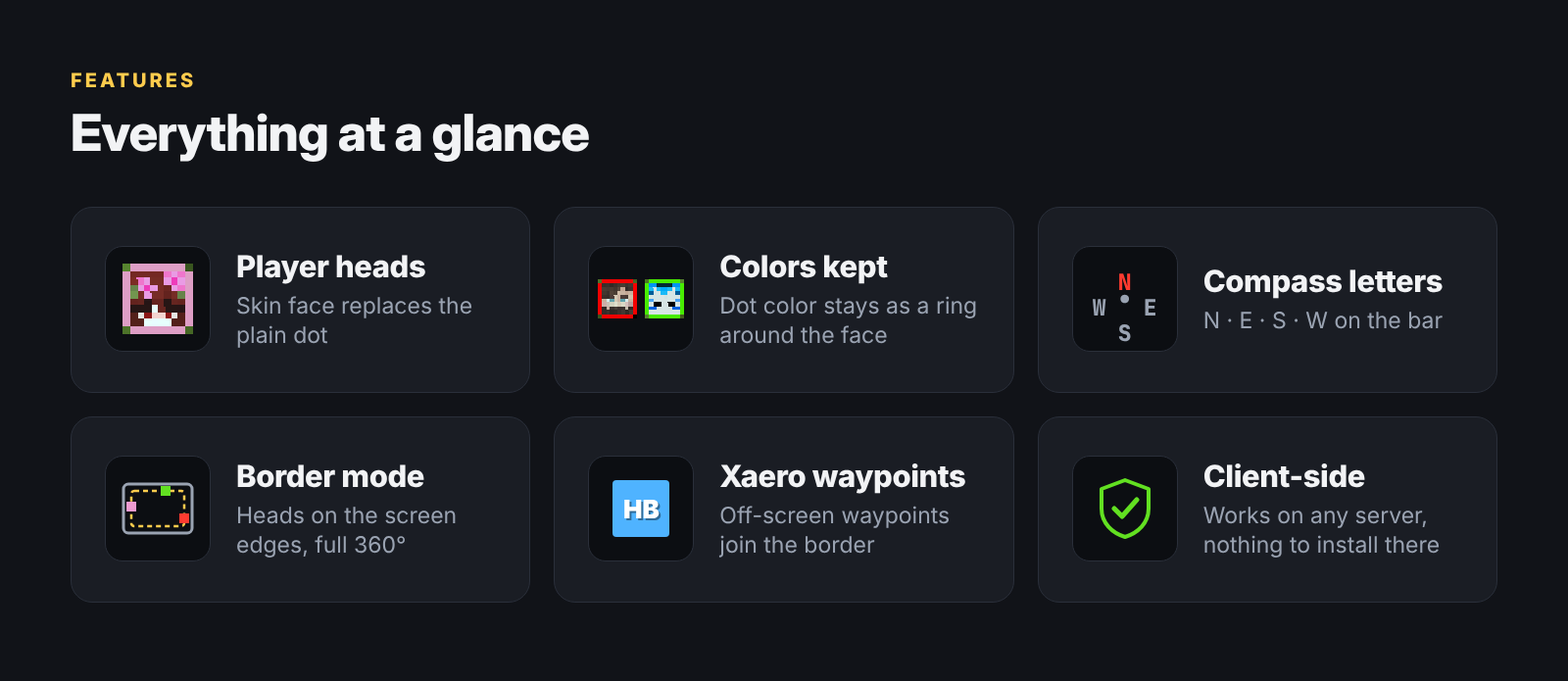
<style>
.page{position:relative;width:1568px;height:681px;background:#111318}
.page>*{position:absolute;margin:0}
.t1{font:19.6px "Inter-ExtraBold";letter-spacing:0.15em;color:#ffcc4d}
.t2{font:51px "InterDisplay-ExtraBold";letter-spacing:-0.015em;color:#f2f3f5}
.t3{font:30.4px "Inter-ExtraBold";letter-spacing:-0.013em;color:#f2f3f5}
.t4{font:22.5px "JetBrainsMono-ExtraBold";color:#ff3b30}
.t5{font:13.7px "JetBrainsMono-ExtraBold";color:#9aa3b2}
.t6{font:22.5px/29.3px "Inter-Regular";color:#9aa3b2}
.t7{font:22.5px "JetBrainsMono-ExtraBold";color:#9aa3b2}
.t8{font:22.5px "Inter-Regular";color:#9aa3b2}
.t9{font:25.5px "Inter-Black";color:#ffffff}
</style>
<div class="page">
<p class="t1" style="left:72px;top:73px;width:121px;height:15px">FEATURES</p>
<p class="t2" style="left:73px;top:113px;width:516px;height:49px">Everything at a glance</p>
<p class="t3" style="left:237px;top:255px;width:188px;height:29px">Player heads</p>
<p class="t3" style="left:720px;top:255px;width:168px;height:29px">Colors kept</p>
<p class="t3" style="left:1204px;top:270px;width:239px;height:29px">Compass letters</p>
<p class="t4" style="left:1119px;top:273px;width:12px;height:17px">N</p>
<p class="t5" style="left:1120px;top:294px;width:10px;height:10px">●</p>
<p class="t6" style="left:237px;top:296px;width:235px;height:52px">Skin face replaces the<br>plain dot</p>
<p class="t6" style="left:720px;top:296px;width:256px;height:48px">Dot color stays as a ring<br>around the face</p>
<p class="t7" style="left:1093px;top:299px;width:13px;height:17px">W</p>
<p class="t7" style="left:1145px;top:299px;width:10px;height:17px">E</p>
<p class="t8" style="left:1204px;top:312px;width:239px;height:17px">N · E · S · W on the bar</p>
<p class="t7" style="left:1118px;top:324px;width:13px;height:18px">S</p>
<p class="t3" style="left:237px;top:465px;width:187px;height:23px">Border mode</p>
<p class="t3" style="left:720px;top:464px;width:245px;height:30px">Xaero waypoints</p>
<p class="t3" style="left:1204px;top:464px;width:161px;height:24px">Client-side</p>
<p class="t6" style="left:237px;top:507px;width:219px;height:51px">Heads on the screen<br>edges, full 360°</p>
<p class="t9" style="left:624px;top:500px;width:36px;height:18px">HB</p>
<p class="t6" style="left:718px;top:506px;width:231px;height:52px">Off-screen waypoints<br>join the border</p>
<p class="t6" style="left:1203px;top:507px;width:237px;height:51px">Works on any server,<br>nothing to install there</p>
</div>
